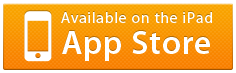
<style>
.page{position:relative;width:236px;height:73px;background:#ffffff}
.page>*{position:absolute;margin:0}
.t1{font:15.6px "MyriadPro-Regular";letter-spacing:0.05em;color:#ffffff}
.t2{font:33.5px "MyriadPro-Semibold";letter-spacing:0.025em;color:#ffffff}
</style>
<div class="page">
<p class="t1" style="left:61px;top:12px;width:151px;height:11px">Available on the iPad</p>
<p class="t2" style="left:62px;top:31px;width:148px;height:30px">App Store</p>
</div>
